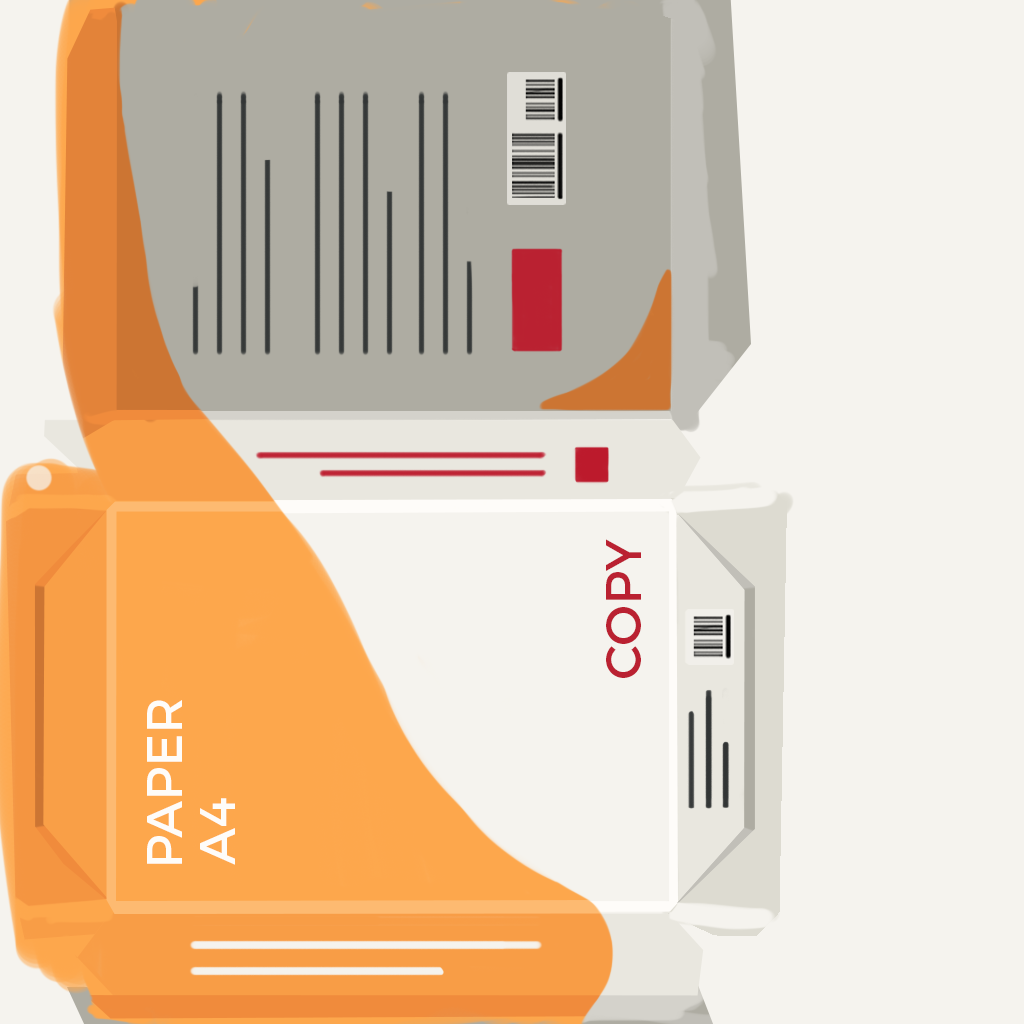
<style>
.page{position:relative;width:1024px;height:1024px;background:#f5f3ee}
.page>*{position:absolute;margin:0}
.t1{font:50px "Montserrat-Regular";color:#ba2131}
.t2{font:50px "Montserrat-Regular";color:#fefcf9}
</style>
<div class="page">
<p class="t1" style="left:606px;top:539px;width:35px;height:139px;rotate:-90deg">COPY</p>
<p class="t2" style="left:147px;top:700px;width:35px;height:164px;rotate:-90deg">PAPER</p>
<p class="t2" style="left:200px;top:798px;width:35px;height:67px;rotate:-90deg">A4</p>
</div>
